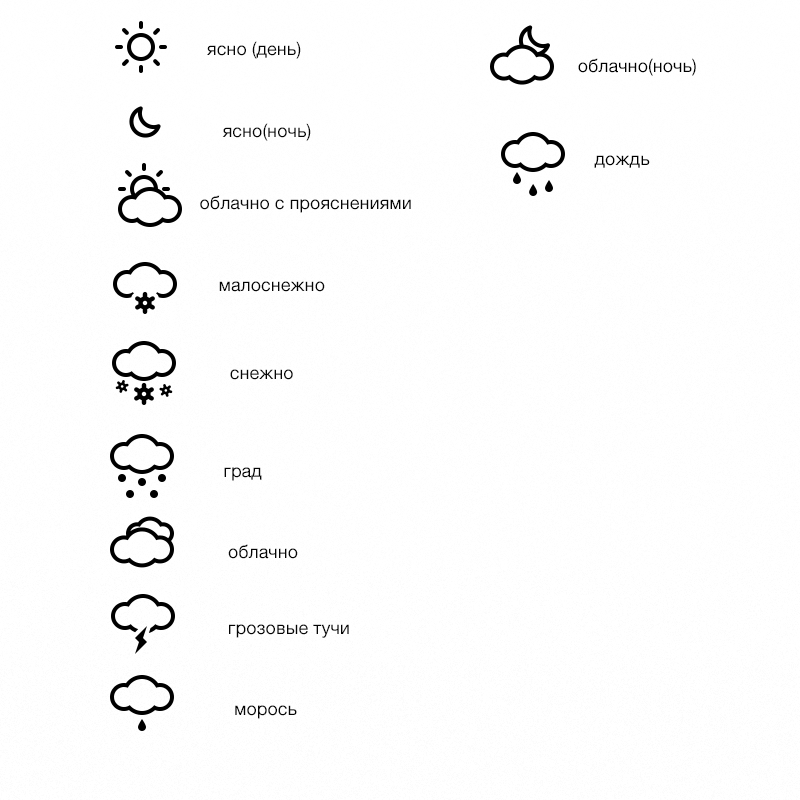
<style>
.page{position:relative;width:800px;height:800px;background:#ffffff}
.page>*{position:absolute;margin:0}
.t1{font:18px "HelveticaNeue";color:#050505}
.t2{font:18px "HelveticaNeue";color:#000000}
</style>
<div class="page">
<p class="t1" style="left:207px;top:41px;width:94px;height:18px">ясно (день)</p>
<p class="t2" style="left:578px;top:58px;width:118px;height:18px">облачно(ночь)</p>
<p class="t1" style="left:222px;top:123px;width:89px;height:18px">ясно(ночь)</p>
<p class="t2" style="left:594px;top:155px;width:56px;height:13px">дождь</p>
<p class="t1" style="left:200px;top:195px;width:211px;height:18px">облачно с прояснениями</p>
<p class="t1" style="left:219px;top:281px;width:106px;height:11px">малоснежно</p>
<p class="t1" style="left:230px;top:369px;width:63px;height:11px">снежно</p>
<p class="t1" style="left:224px;top:467px;width:38px;height:14px">град</p>
<p class="t1" style="left:228px;top:544px;width:70px;height:15px">облачно</p>
<p class="t1" style="left:229px;top:624px;width:120px;height:14px">грозовые тучи</p>
<p class="t1" style="left:235px;top:705px;width:62px;height:14px">морось</p>
</div>
